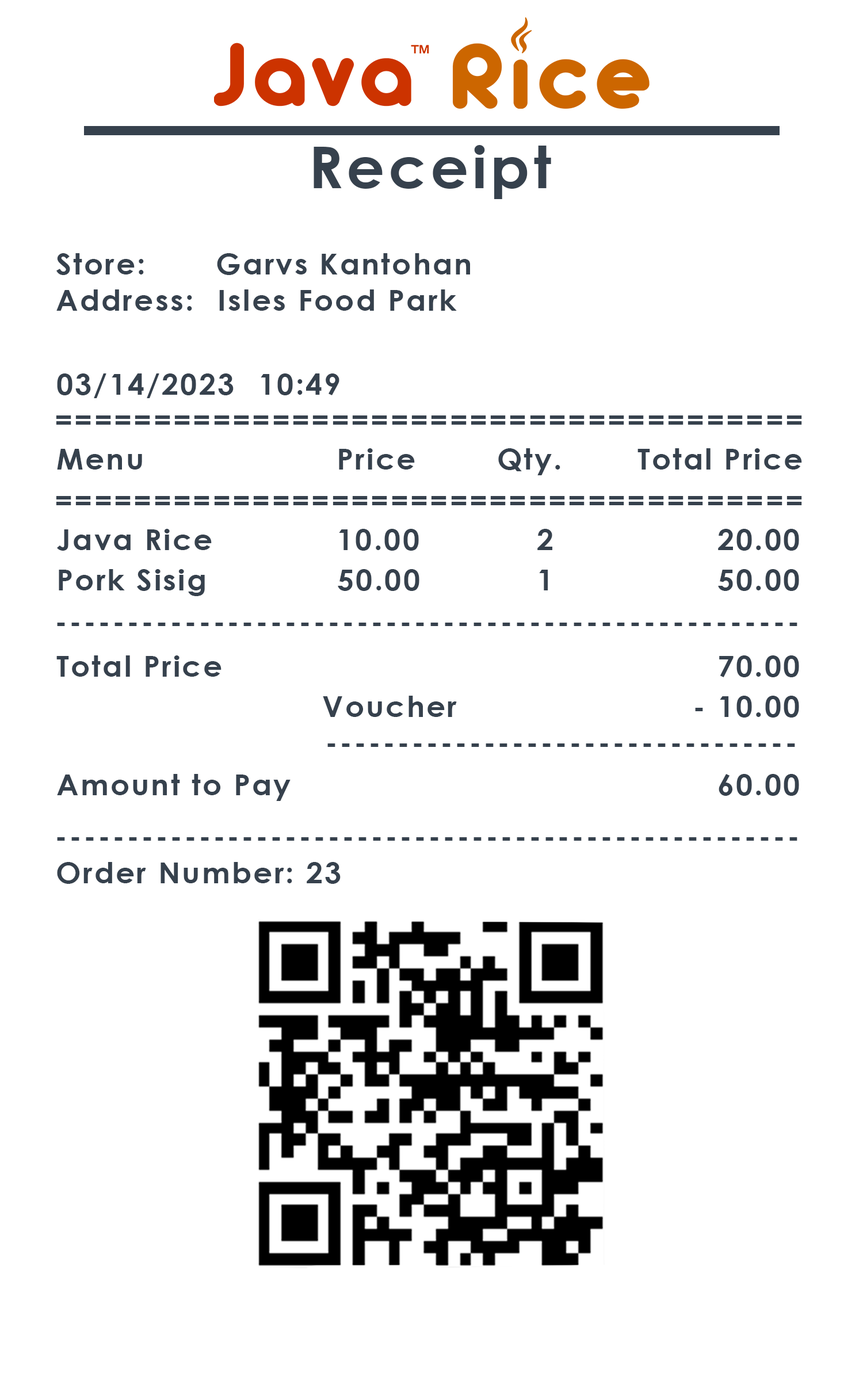
<style>
.page{position:relative;width:863px;height:1381px;background:#ffffff}
.page>*{position:absolute;margin:0}
.t1{font:57.6px "CenturyGothic-Bold";letter-spacing:0.06em;color:#36414d;scale:1.04 1}
.t2{font:28.8px/36px "CenturyGothic-Bold";letter-spacing:0.06em;color:#36414d;scale:1.04 1}
.t3{font:28.8px "CenturyGothic-Bold";letter-spacing:0.06em;color:#36414d;scale:1.04 1}
</style>
<div class="page">
<p class="t1" style="left:314px;top:145px;width:237px;height:54px">Receipt</p>
<p class="t2" style="left:56px;top:253px;width:414px;height:58px">Store:  Garvs Kantohan<br>Address:  Isles Food Park</p>
<p class="t3" style="left:57px;top:374px;width:283px;height:24px">03/14/2023 10:49</p>
<p class="t3" style="left:56px;top:416px;width:746px;height:9px">======================================</p>
<p class="t3" style="left:57px;top:448px;width:745px;height:27px">Menu     Price   Qty.    Total Price</p>
<p class="t3" style="left:56px;top:496px;width:746px;height:9px">======================================</p>
<p class="t3" style="left:57px;top:529px;width:742px;height:22px">Java Rice    10.00     2           20.00</p>
<p class="t3" style="left:59px;top:569px;width:740px;height:27px">Pork Sisig       50.00     1           50.00</p>
<p class="t3" style="left:57px;top:623px;width:741px;height:3px">----------------------------------------------------</p>
<p class="t3" style="left:56px;top:656px;width:743px;height:21px">Total Price              70.00</p>
<p class="t3" style="left:323px;top:696px;width:476px;height:22px">Voucher       - 10.00</p>
<p class="t3" style="left:327px;top:744px;width:468px;height:3px">---------------------------------</p>
<p class="t3" style="left:57px;top:774px;width:742px;height:27px">Amount to Pay             60.00</p>
<p class="t3" style="left:57px;top:837px;width:741px;height:4px">----------------------------------------------------</p>
<p class="t3" style="left:57px;top:862px;width:284px;height:22px">Order Number: 23</p>
</div>
